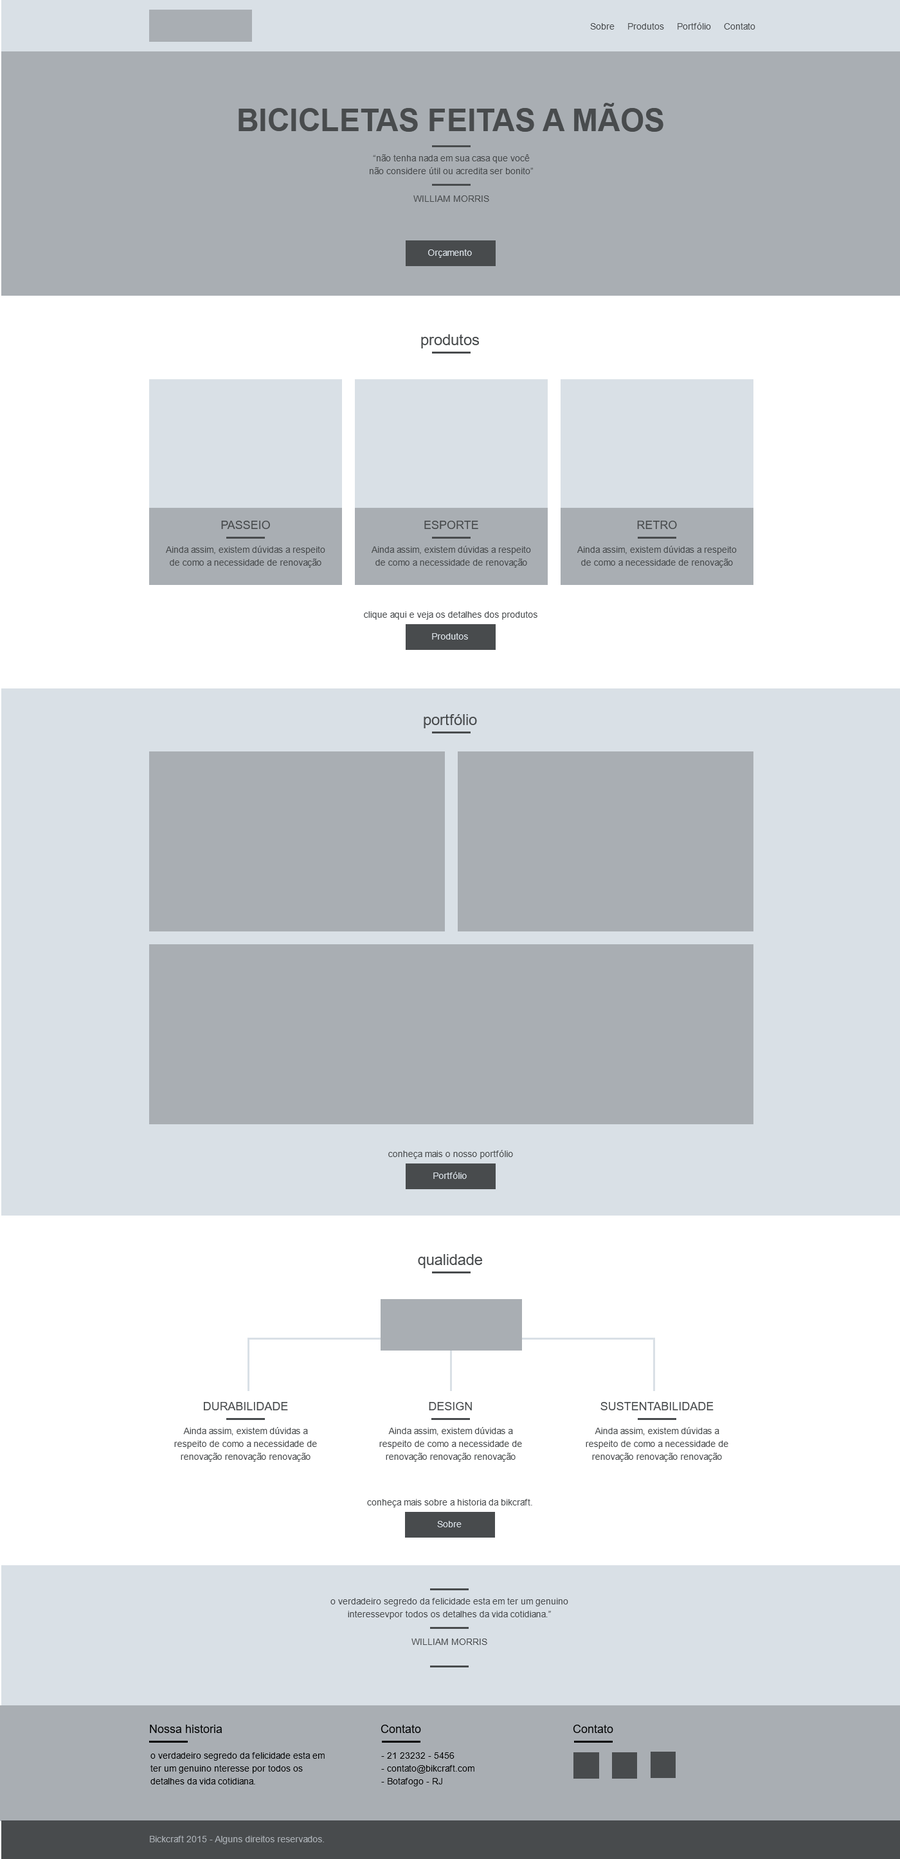
<style>
.page{position:relative;width:900px;height:1859px;background:#ffffff}
.page>*{position:absolute;margin:0}
.t1{font:9px "ArialMT";color:#484b4d}
.t2{font:30.9px "Arial-BoldMT";color:#484b4d;text-transform:uppercase}
.t3{font:9px/12.9px "ArialMT";color:#484b4d}
.t4{font:9px "ArialMT";color:#d9e0e6}
.t5{font:15.4px "ArialMT";color:#484b4d}
.t6{font:11.6px "ArialMT";color:#484b4d}
.t7{font:11.6px "ArialMT";color:#000101}
.t8{font:9px/12.9px "ArialMT";color:#000000}
.t9{font:9px "ArialMT";color:#a9aeb3}
</style>
<div class="page">
<p class="t1" style="left:590px;top:22px;width:165px;height:8px">Sobre     Produtos     Portfólio     Contato</p>
<p class="t2" style="left:239px;top:103px;width:424px;height:29px">Bicicletas Feitas a Mãos</p>
<p class="t3" style="left:370px;top:154px;width:163px;height:20px;text-align:center">“não tenha nada em sua casa que você<br>não considere útil ou acredita ser bonito”</p>
<p class="t1" style="left:413px;top:195px;width:76px;height:7px">WILLIAM MORRIS</p>
<p class="t4" style="left:428px;top:249px;width:44px;height:9px">Orçamento</p>
<p class="t5" style="left:421px;top:334px;width:58px;height:14px">produtos</p>
<p class="t6" style="left:221px;top:521px;width:49px;height:8px">PASSEIO</p>
<p class="t6" style="left:424px;top:521px;width:54px;height:8px">ESPORTE</p>
<p class="t6" style="left:637px;top:521px;width:40px;height:8px">RETRO</p>
<p class="t3" style="left:166px;top:546px;width:159px;height:22px;text-align:center">Ainda assim, existem dúvidas a respeito de como a necessidade de renovação</p>
<p class="t3" style="left:372px;top:546px;width:159px;height:22px;text-align:center">Ainda assim, existem dúvidas a respeito de como a necessidade de renovação</p>
<p class="t3" style="left:577px;top:546px;width:160px;height:22px;text-align:center">Ainda assim, existem dúvidas a respeito de como a necessidade de renovação</p>
<p class="t1" style="left:364px;top:611px;width:173px;height:9px">clique aqui e veja os detalhes dos produtos</p>
<p class="t4" style="left:432px;top:633px;width:36px;height:7px">Produtos</p>
<p class="t5" style="left:424px;top:714px;width:53px;height:14px">portfólio</p>
<p class="t1" style="left:388px;top:1150px;width:125px;height:9px">conheça mais o nosso portfólio</p>
<p class="t4" style="left:433px;top:1172px;width:34px;height:7px">Portfólio</p>
<p class="t5" style="left:418px;top:1254px;width:64px;height:14px">qualidade</p>
<p class="t6" style="left:204px;top:1402px;width:84px;height:8px">DURABILIDADE</p>
<p class="t6" style="left:429px;top:1402px;width:43px;height:8px">DESIGN</p>
<p class="t6" style="left:600px;top:1402px;width:114px;height:8px">SUSTENTABILIDADE</p>
<p class="t3" style="left:174px;top:1427px;width:143px;height:35px;text-align:center">Ainda assim, existem dúvidas a respeito de como a necessidade de renovação renovação renovação</p>
<p class="t3" style="left:379px;top:1427px;width:143px;height:35px;text-align:center">Ainda assim, existem dúvidas a respeito de como a necessidade de renovação renovação renovação</p>
<p class="t3" style="left:586px;top:1427px;width:142px;height:35px;text-align:center">Ainda assim, existem dúvidas a respeito de como a necessidade de renovação renovação renovação</p>
<p class="t1" style="left:367px;top:1499px;width:165px;height:9px">conheça mais sobre a historia da bikcraft.</p>
<p class="t4" style="left:437px;top:1521px;width:25px;height:6px">Sobre</p>
<p class="t3" style="left:330px;top:1598px;width:238px;height:21px;text-align:center">o verdadeiro segredo da felicidade esta em ter um genuino<br>interessevpor todos os detalhes da vida cotidiana.”</p>
<p class="t1" style="left:411px;top:1639px;width:76px;height:6px">WILLIAM MORRIS</p>
<p class="t7" style="left:150px;top:1725px;width:72px;height:8px">Nossa historia</p>
<p class="t7" style="left:381px;top:1725px;width:40px;height:8px">Contato</p>
<p class="t7" style="left:573px;top:1725px;width:40px;height:8px">Contato</p>
<p class="t8" style="left:150px;top:1752px;width:175px;height:33px">o verdadeiro segredo da felicidade esta em ter um genuino nteresse por todos os detalhes da vida cotidiana.</p>
<p class="t8" style="left:381px;top:1752px;width:93px;height:35px">- 21 23232 - 5456<br>- contato@bikcraft.com<br>- Botafogo - RJ</p>
<p class="t9" style="left:150px;top:1836px;width:174px;height:8px">Bickcraft 2015 - Alguns direitos reservados.</p>
</div>
